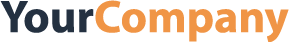
<style>
.page{position:relative;width:289px;height:42px;background:#ffffff}
.page>*{position:absolute;margin:0}
.t1{font:46px "MyriadPro-Bold";color:#f09546}
.t2{font:46px "MyriadPro-Bold";color:#243141}
</style>
<div class="page">
<p class="t1" style="left:0px;top:0px;width:289px;height:43px"><span class="t2">Your</span>Company</p>
</div>
